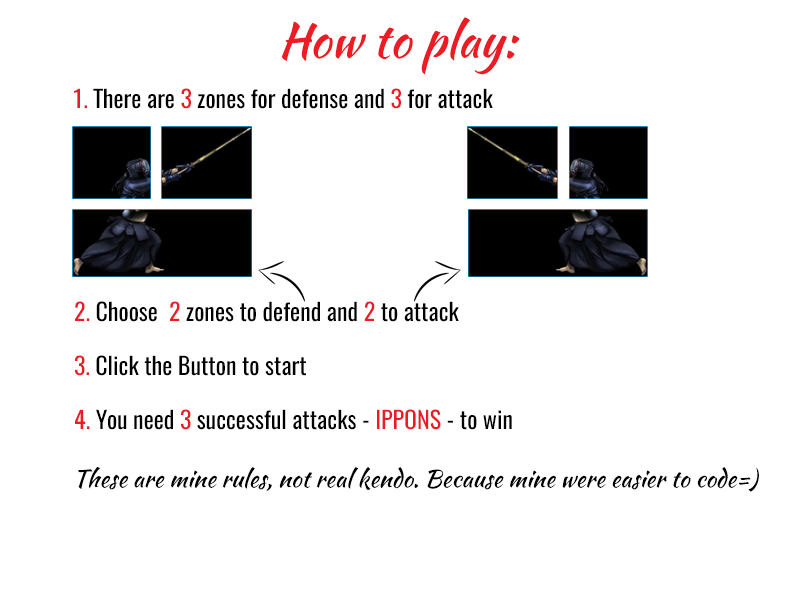
<style>
.page{position:relative;width:800px;height:600px;background:#ffffff}
.page>*{position:absolute;margin:0}
.t1{font:48px "KaushanScript-Regular";color:#ed1c24}
.t2{font:24px "Oswald-Regular";color:#000000}
.t3{font:24px "Oswald-Regular";color:#ed1c24}
.t4{font:24px "KaushanScript-Regular";color:#000000}
</style>
<div class="page">
<p class="t1" style="left:281px;top:17px;width:239px;height:58px">How to play:</p>
<p class="t2" style="left:74px;top:88px;width:419px;height:21px"><span class="t3">1. </span>There are<span class="t3"> 3 </span>zones for defense and <span class="t3">3</span> for attack</p>
<p class="t2" style="left:75px;top:301px;width:384px;height:21px"><span class="t3">2. </span>Choose<span class="t3">  2 </span>zones to defend and <span class="t3">2</span> to attack</p>
<p class="t2" style="left:75px;top:355px;width:231px;height:21px"><span class="t3">3. </span>Click the Button to start</p>
<p class="t2" style="left:75px;top:409px;width:437px;height:21px"><span class="t3">4. </span>You need <span class="t3">3</span> successful attacks - <span class="t3">IPPONS</span> - to win</p>
<p class="t4" style="left:78px;top:467px;width:681px;height:25px">These are mine rules, not real kendo. Because mine were easier to code=)</p>
</div>
